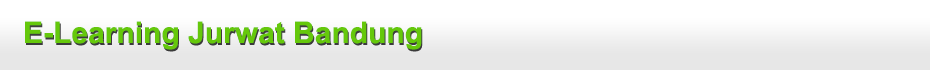
<style>
.page{position:relative;width:930px;height:70px;background:#ffffff}
.page>*{position:absolute;margin:0}
.t1{font:30px "Arial-BoldMT";color:#65c80b}
</style>
<div class="page">
<p class="t1" style="left:25px;top:21px;width:397px;height:29px">E-Learning Jurwat Bandung</p>
</div>
